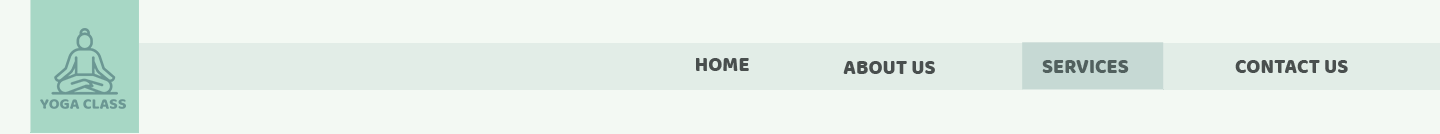
<style>
.page{position:relative;width:1440px;height:134px;background:#f3f9f3}
.page>*{position:absolute;margin:0}
.t1{font:20.7px "BalooBhai-Regular";letter-spacing:-0.005em;color:#444444;text-transform:uppercase}
.t2{font:20.7px "BalooBhai-Regular";letter-spacing:-0.005em;color:#51605e;text-transform:uppercase}
</style>
<div class="page">
<p class="t1" style="left:696px;top:58px;width:53px;height:13px">HOME</p>
<p class="t1" style="left:843px;top:61px;width:92px;height:13px">ABOUT US</p>
<p class="t2" style="left:1042px;top:60px;width:87px;height:13px">SERVICES</p>
<p class="t1" style="left:1235px;top:60px;width:113px;height:13px">CONTACT US</p>
</div>
